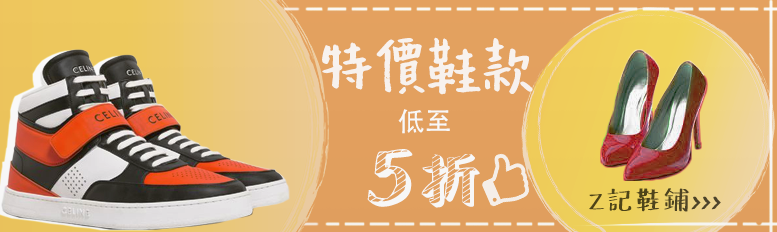
<style>
.page{position:relative;width:777px;height:232px}
.page>*{position:absolute;margin:0}
.t1{font:73.3px "HanyiSentyCrayon";color:#ffffff}
.t2{font:26.7px "AdobeHeitiStd-Regular";color:#ffffff}
.t3{font:80px "SentyCHALK";color:#ffffff}
.t4{font:66.7px "SentyCHALK";color:#ffffff}
.t5{font:26.7px "HanyiSentyChalkOriginal";color:#4d441d}
</style>
<div class="page">
<p class="t1" style="left:322px;top:37px;width:211px;height:58px;opacity:0.9">特價鞋款</p>
<p class="t2" style="left:398px;top:109px;width:52px;height:25px">低至</p>
<p class="t3" style="left:367px;top:149px;width:113px;height:59px">5<span class="t4">折</span></p>
<p class="t5" style="left:589px;top:188px;width:132px;height:24px">Z記鞋鋪&gt;&gt;&gt;</p>
</div>
